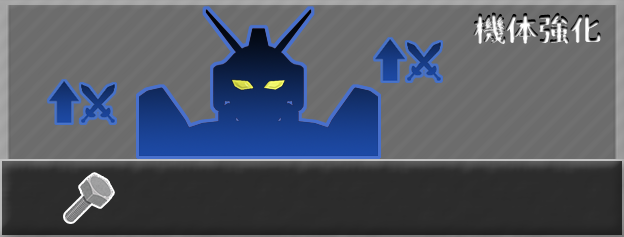
<style>
.page{position:relative;width:624px;height:237px;background:#6c6c6c}
.page>*{position:absolute;margin:0}
.t1{font:33.7px "UDDigiKyokashoNK-B";letter-spacing:-0.05em}
</style>
<div class="page">
<p class="t1" style="left:473px;top:12px;width:128px;height:32px">機体強化</p>
</div>
